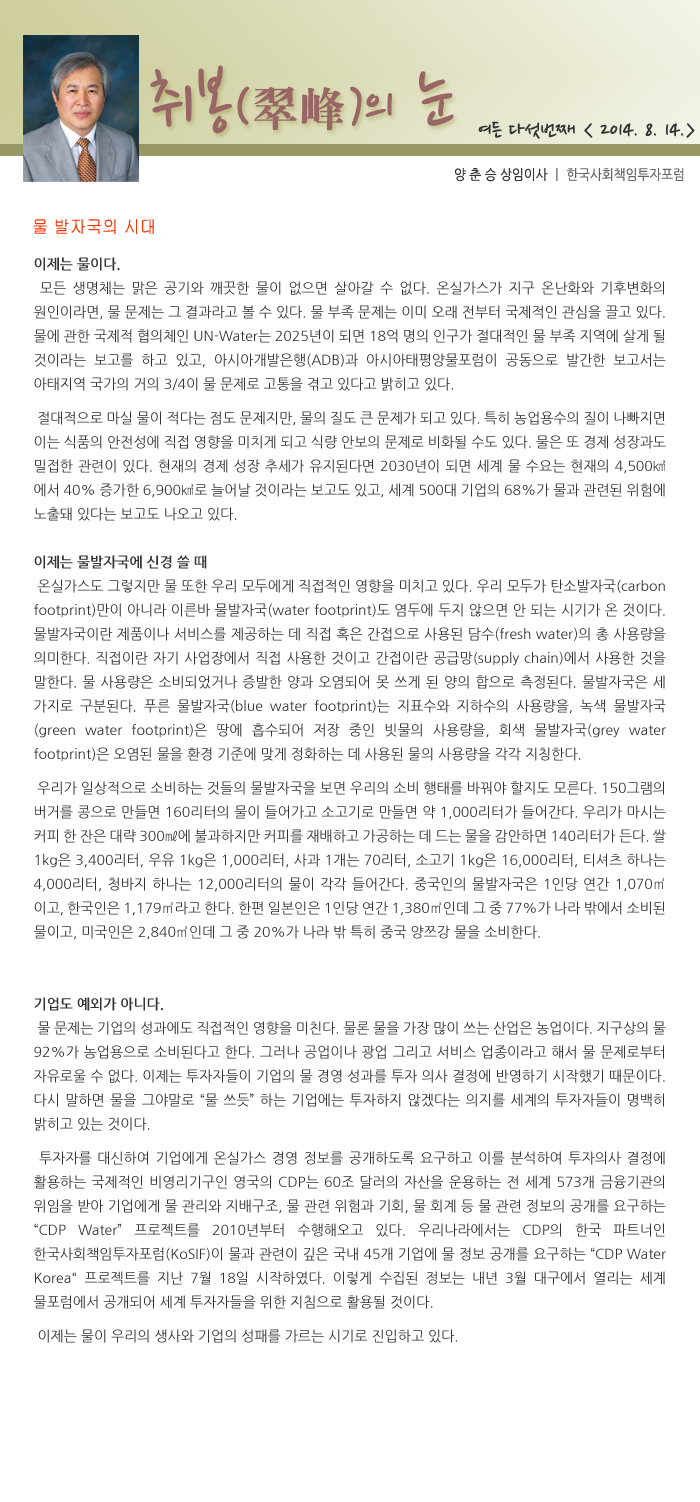
<style>
.page{position:relative;width:700px;height:1502px;background:#ffffff}
.page>*{position:absolute;margin:0}
.t1{font:77.5px "NanumPen";color:#996666}
.t2{font:60px "NanumPen";color:#996666}
.t3{font:48px "H2mjrE";color:#996666}
.t4{font:24px "NanumPen";color:#333333}
.t5{font:14px "NanumGothic";color:#666666;scale:0.9 1}
.t6{font:14px "NanumGothic";color:#333333;scale:0.9 1}
.t7{font:18px "Gulim";color:#ff3300;scale:0.9 1}
.t8{font:14px/24px "NanumGothic";color:#333333}
.t9{font:14px/24px "NanumGothicBold";color:#333333}
.t10{font:14px/10px "NanumGothic";color:#333333}
</style>
<div class="page">
<p class="t1" style="left:150px;top:65px;width:304px;height:69px">취봉<span class="t2">(</span><span class="t3">翠峰</span><span class="t2">)</span><span class="t2">의</span> 눈</p>
<p class="t4" style="left:478px;top:121px;width:217px;height:18px">여든 다섯번째 &lt; 2014. 8. 14.&gt;</p>
<p class="t5" style="left:455px;top:168px;width:229px;height:14px"><span class="t6">양 춘 승 상임이사 </span>ㅣ 한국사회책임투자포럼</p>
<p class="t7" style="left:33px;top:219px;width:121px;height:15px">물 발자국의 시대</p>
<p class="t8" style="left:34px;top:257px;width:632px;height:1086px;text-align:justify"><span class="t9">이제는 물이다.<br></span> 모든 생명체는 맑은 공기와 깨끗한 물이 없으면 살아갈 수 없다. 온실가스가 지구 온난화와 기후변화의 원인이라면, 물 문제는 그 결과라고 볼 수 있다. 물 부족 문제는 이미 오래 전부터 국제적인 관심을 끌고 있다. 물에 관한 국제적 협의체인 UN-Water는 2025년이 되면 18억 명의 인구가 절대적인 물 부족 지역에 살게 될 것이라는 보고를 하고 있고, 아시아개발은행(ADB)과 아시아태평양물포럼이 공동으로 발간한 보고서는 아태지역 국가의 거의 3/4이 물 문제로 고통을 겪고 있다고 밝히<span class="t10">고 있다. <br><br> 절대적으로 마실 물이 적다는 점도 문제지만, 물의 질도 큰 문제가 되고 있다. 특</span>히 농업용수의 질이 나빠지면 이는 식품의 안전성에 직접 영향을 미치게 되고 식량 안보의 문제로 비화될 수도 있다. 물은 또 경제 성장과도 밀접한 관련이 있다. 현재의 경제 성장 추세가 유지된다면 2030년이 되면 세계 물 수요는 현재의 4,500㎦에서 40% 증가한 6,900㎦로 늘어날 것이라는 보고도 있고, 세계 500대 기업의 68%가 물과 관련된 위험에 노출돼 있다는 보고도 나오고 있다.<br><br><span class="t9">이제는 물발자국에 신경 쓸 때<br></span> 온실가스도 그렇지만 물 또한 우리 모두에게 직접적인 영향을 미치고 있다. 우리 모두가 탄소발자국(carbon footprint)만이 아니라 이른바 물발자국(water footprint)도 염두에 두지 않으면 안 되는 시기가 온 것이다. 물발자국이란 제품이나 서비스를 제공하는 데 직접 혹은 간접으로 사용된 담수(fresh water)의 총 사용량을 의미한다. 직접이란 자기 사업장에서 직접 사용한 것이고 간접이란 공급망(supply chain)에서 사용한 것을 말한다. 물 사용량은 소비되었거나 증발한 양과 오염되어 못 쓰게 된 양의 합으로 측정된다. 물발자국은 세 가지로 구분된다. 푸른 물발자국(blue water footprint)는 지표수와 지하수의 사용량을, 녹색 물발자국(green water footprint)은 땅에 흡수되어 저장 중인 빗물의 사용량을, 회색 물발자국(grey water footprint)은 오염된 물을 환경 기준에 맞게 정화하는 데 사용된 물의 사용량<span class="t10">을 각각 지칭한다.<br><br> 우리가 일상적으로 소비하는 것들의 물발자국을 보면 우리의 소비 행태를 바꿔야 할지도 모</span>른다. 150그램의 버거를 콩으로 만들면 160리터의 물이 들어가고 소고기로 만들면 약 1,000리터가 들어간다. 우리가 마시는 커피 한 잔은 대략 300㎖에 불과하지만 커피를 재배하고 가공하는 데 드는 물을 감안하면 140리터가 든다. 쌀 1kg은 3,400리터, 우유 1kg은 1,000리터, 사과 1개는 70리터, 소고기 1kg은 16,000리터, 티셔츠 하나는 4,000리터, 청바지 하나는 12,000리터의 물이 각각 들어간다. 중국인의 물발자국은 1인당 연간 1,070㎥이고, 한국인은 1,179㎥라고 한다. 한편 일본인은 1인당 연간 1,380㎥인데 그 중 77%가 나라 밖에서 소비된 물이고, 미국인은 2,840㎥인데 그 중 20%가 나라 밖 특히 중국 양쯔강 물을 소비한다. <br><br><br><span class="t9">기업도 예외가 아니다.<br></span> 물 문제는 기업의 성과에도 직접적인 영향을 미친다. 물론 물을 가장 많이 쓰는 산업은 농업이다. 지구상의 물 92%가 농업용으로 소비된다고 한다. 그러나 공업이나 광업 그리고 서비스 업종이라고 해서 물 문제로부터 자유로울 수 없다. 이제는 투자자들이 기업의 물 경영 성과를 투자 의사 결정에 반영하기 시작했기 때문이다. 다시 말하면 물을 그야말로 “물 쓰듯” 하는 기업에는 투자하지 않겠다는 의지를 세계의 투자자들이 명백히 밝히고 있는<span class="t10"> 것이다. <br><br> 투자자를 대신하여 기업에게 온실</span>가스 경영 정보를 공개하도록 요구하고 이를 분석하여 투자의사 결정에 활용하는 국제적인 비영리기구인 영국의 CDP는 60조 달러의 자산을 운용하는 전 세계 573개 금융기관의 위임을 받아 기업에게 물 관리와 지배구조, 물 관련 위험과 기회, 물 회계 등 물 관련 정보의 공개를 요구하는 “CDP Water” 프로젝트를 2010년부터 수행해오고 있다. 우리나라에서는 CDP의 한국 파트너인 한국사회책임투자포럼(KoSIF)이 물과 관련이 깊은 국내 45개 기업에 물 정보 공개를 요구하는 “CDP Water Korea" 프로젝트를 지난 7월 18일 시작하였다. 이렇게 수집된 정보는 내년 3월 대구에서 열리는 세계 물포럼에서 공개되어 세계 투자자<span class="t10">들을 위한 지침으로 활용될 것이다.   <br><br> 이제는 물이 우리의 생사와 기업의 성패를 가르는 시기로 진입하고 있다.</span></p>
</div>
